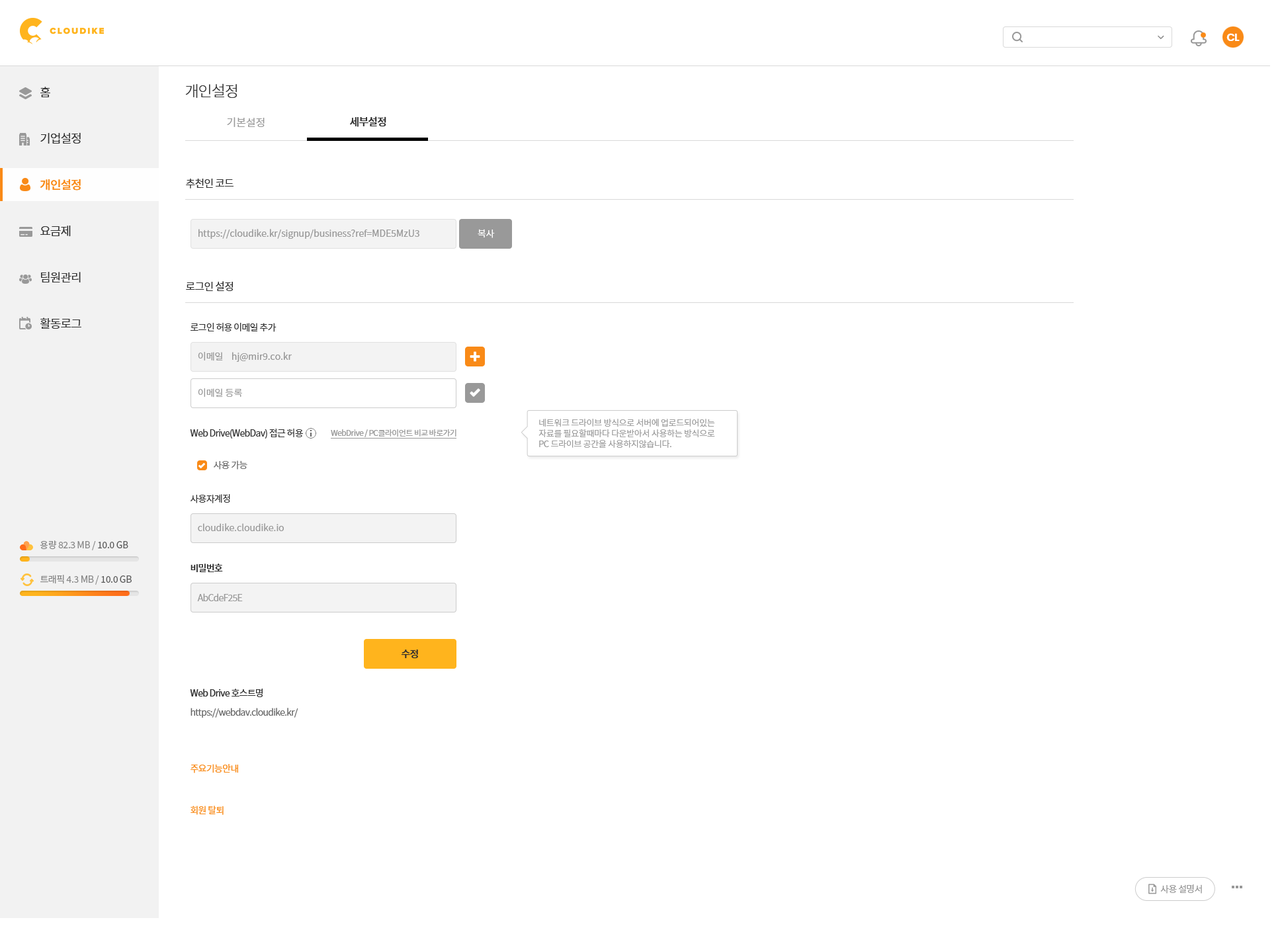
<style>
.page{position:relative;width:1282px;height:930px;background:#ffffff}
.page>*{position:absolute;margin:0}
.t1{font:10.6px "Poppins-SemiBold";letter-spacing:-0.05em;color:#ffffff}
.t2{font:11.9px/46.3px "NotoSansCJKkr-DemiLight";letter-spacing:-0.05em;color:#333333}
.t3{font:11.9px/46.3px "NotoSansCJKkr-Medium";letter-spacing:-0.05em;color:#f98a17}
.t4{font:15.2px "NotoSansCJKkr-Light";letter-spacing:-0.05em;color:#333333}
.t5{font:10.6px "NotoSansCJKkr-DemiLight";color:#999999}
.t6{font:10.6px "NotoSansCJKkr-Medium";letter-spacing:-0.05em;color:#333333}
.t7{font:10.6px "NotoSansCJKkr-Regular";letter-spacing:-0.05em;color:#333333}
.t8{font:9.3px "NotoSansCJKkr-DemiLight";color:#999999}
.t9{font:9.3px "NotoSansCJKkr-DemiLight";color:#ffffff}
.t10{font:9.3px "NotoSansCJKkr-Regular";letter-spacing:-0.05em;color:#333333}
.t11{font:8.6px/10.6px "NotoSansCJKkr-DemiLight";letter-spacing:-0.025em;color:#999999}
.t12{font:7.9px "NotoSansCJKkr-Regular";letter-spacing:-0.05em;color:#999999}
.t13{font:9.3px "NotoSansCJKkr-DemiLight";letter-spacing:-0.05em;color:#666666}
.t14{font:9.3px "NotoSansCJKkr-Regular";letter-spacing:-0.025em;color:#888888}
.t15{font:9.3px "NotoSansCJKkr-Regular";letter-spacing:-0.025em;color:#585858}
.t16{font:9.3px "NotoSansCJKkr-Medium";letter-spacing:-0.05em;color:#333333}
.t17{font:9.3px "NotoSansCJKkr-DemiLight";letter-spacing:-0.05em;color:#999999}
.t18{font:9.9px "NotoSansCJKkr-Medium";letter-spacing:-0.05em;color:#2d2d2d}
.t19{font:9.3px "NotoSansCJKkr-Regular";letter-spacing:-0.05em;color:#f98a17}
.t20{font:9.3px "NotoSansCJKkr-Regular";letter-spacing:-0.05em;color:#999999}
</style>
<div class="page">
<p class="t1" style="left:1226px;top:33px;width:14px;height:8px">CL</p>
<p class="t2" style="left:40px;top:87px;width:41px;height:242px">홈<br>기업설정<br><span class="t3">개인설정<br></span>요금제<br>팀원관리<br>활동로그</p>
<p class="t4" style="left:185px;top:83px;width:52px;height:15px">개인설정</p>
<p class="t5" style="left:227px;top:117px;width:38px;height:10px">기본설정</p>
<p class="t6" style="left:350px;top:116px;width:36px;height:11px">세부설정</p>
<p class="t7" style="left:186px;top:179px;width:48px;height:10px">추천인 코드</p>
<p class="t8" style="left:198px;top:229px;width:221px;height:10px">https://cloudike.kr/signup/business?ref=MDE5MzU3</p>
<p class="t9" style="left:478px;top:229px;width:17px;height:9px">복사</p>
<p class="t7" style="left:186px;top:281px;width:47px;height:10px">로그인 설정</p>
<p class="t10" style="left:191px;top:323px;width:86px;height:9px">로그인 허용 이메일 추가</p>
<p class="t8" style="left:198px;top:352px;width:94px;height:10px">이메일    hj@mir9.co.kr</p>
<p class="t8" style="left:198px;top:388px;width:44px;height:10px">이메일 등록</p>
<p class="t11" style="left:538px;top:419px;width:177px;height:29px">네트워크 드라이브 방식으로 서버에 업로드되어있는 <br>자료를 필요할때마다 다운받아서 사용하는 방식으로 <br>PC 드라이브 공간을 사용하지않습니다.</p>
<p class="t10" style="left:190px;top:429px;width:113px;height:10px">Web Drive(WebDav) 접근 허용</p>
<p class="t12" style="left:331px;top:429px;width:125px;height:8px">WebDrive / PC클라이언트 비교 바로가기</p>
<p class="t13" style="left:214px;top:460px;width:33px;height:10px">사용 가능</p>
<p class="t10" style="left:191px;top:494px;width:39px;height:9px">사용자계정</p>
<p class="t8" style="left:198px;top:523px;width:86px;height:8px">cloudike.cloudike.io</p>
<p class="t14" style="left:40px;top:540px;width:88px;height:10px">용량 82.3 MB / <span class="t15">10.0 GB</span></p>
<p class="t16" style="left:191px;top:564px;width:32px;height:8px">비밀번호</p>
<p class="t14" style="left:40px;top:575px;width:92px;height:10px">트래픽 4.3 MB / <span class="t15">10.0 GB</span></p>
<p class="t17" style="left:197px;top:593px;width:46px;height:8px">AbCdeF25E</p>
<p class="t18" style="left:402px;top:650px;width:16px;height:9px">수정</p>
<p class="t10" style="left:190px;top:689px;width:73px;height:8px">Web Drive 호스트명</p>
<p class="t13" style="left:191px;top:708px;width:107px;height:10px">https://webdav.cloudike.kr/</p>
<p class="t19" style="left:191px;top:764px;width:47px;height:9px">주요기능안내</p>
<p class="t19" style="left:191px;top:806px;width:33px;height:9px">회원 탈퇴</p>
<p class="t20" style="left:1160px;top:884px;width:42px;height:10px">사용 설명서</p>
</div>
